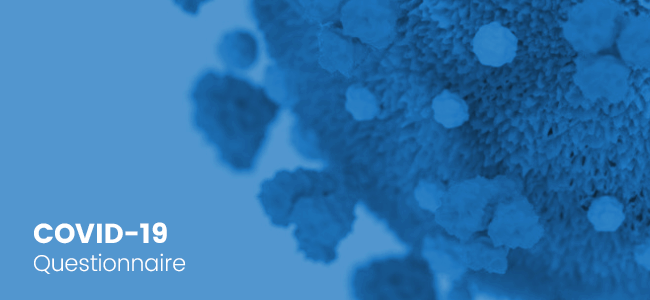
<style>
.page{position:relative;width:650px;height:300px;background:#5296cf}
.page>*{position:absolute;margin:0}
.t1{font:22.9px "Poppins-Light";color:#ffffff}
.t2{font:27.5px "Poppins";color:#ffffff}
</style>
<div class="page">
<p class="t1" style="left:34px;top:222px;width:152px;height:52px"><span class="t2">COVID-19<br></span>Questionnaire</p>
</div>
